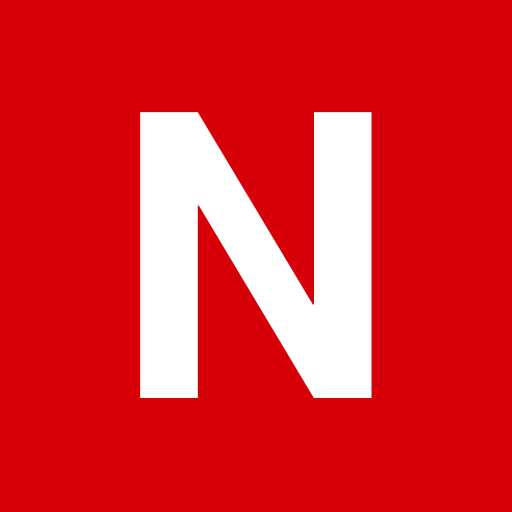
<style>
.page{position:relative;width:512px;height:512px;background:#d70008}
.page>*{position:absolute;margin:0}
.t1{font:402px "Roboto-Bold";color:#ffffff}
</style>
<div class="page">
<p class="t1" style="left:140px;top:112px;width:232px;height:286px">N</p>
</div>
